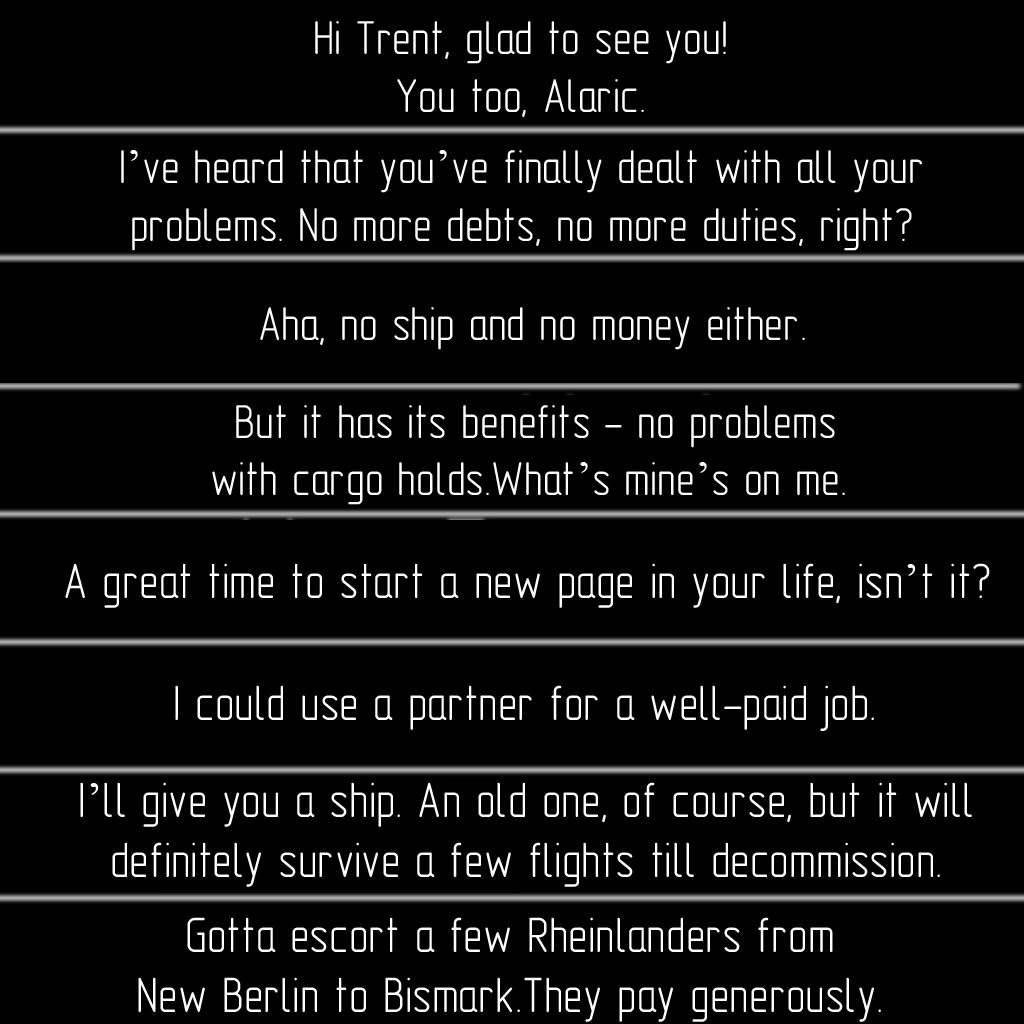
<style>
.page{position:relative;width:1024px;height:1024px;background:#000000}
.page>*{position:absolute;margin:0}
.t1{font:48px "GOST-2.304-81typeA";color:#ffffff}
.t2{font:48px "TimesNewRomanPSMT";color:#ffffff}
.t3{font:50px "GOST-2.304-81typeA";color:#ffffff}
.t4{font:50px "TimesNewRomanPSMT";color:#ffffff}
</style>
<div class="page">
<p class="t1" style="left:315px;top:21px;width:411px;height:96px;text-align:center">Hi Trent, glad to see you!<br>You too, Alaric.</p>
<p class="t1" style="left:121px;top:150px;width:801px;height:101px;text-align:center">I<span class="t2">’</span>ve heard that you<span class="t2">’</span>ve finally dealt with all your<br>problems. No more debts, no more duties, right?</p>
<p class="t1" style="left:260px;top:307px;width:545px;height:43px">Aha, no ship and no money either.</p>
<p class="t1" style="left:212px;top:405px;width:633px;height:100px;text-align:center">But it has its benefits - no problems<br>with cargo holds.What<span class="t2">’</span>s mine<span class="t2">’</span>s on me.</p>
<p class="t3" style="left:65px;top:563px;width:925px;height:45px">A great time to start a new page in your life, isn<span class="t4">’</span>t it?</p>
<p class="t3" style="left:175px;top:685px;width:699px;height:46px">I could use a partner for a well-paid job.</p>
<p class="t3" style="left:80px;top:782px;width:892px;height:105px;text-align:center">I<span class="t4">’</span>ll give you a ship. An old one, of course, but it will<br>definitely survive a few flights till decommission.</p>
<p class="t3" style="left:138px;top:917px;width:743px;height:105px;text-align:center">Gotta escort a few Rheinlanders from<br>New Berlin to Bismark.They pay generously.</p>
</div>
